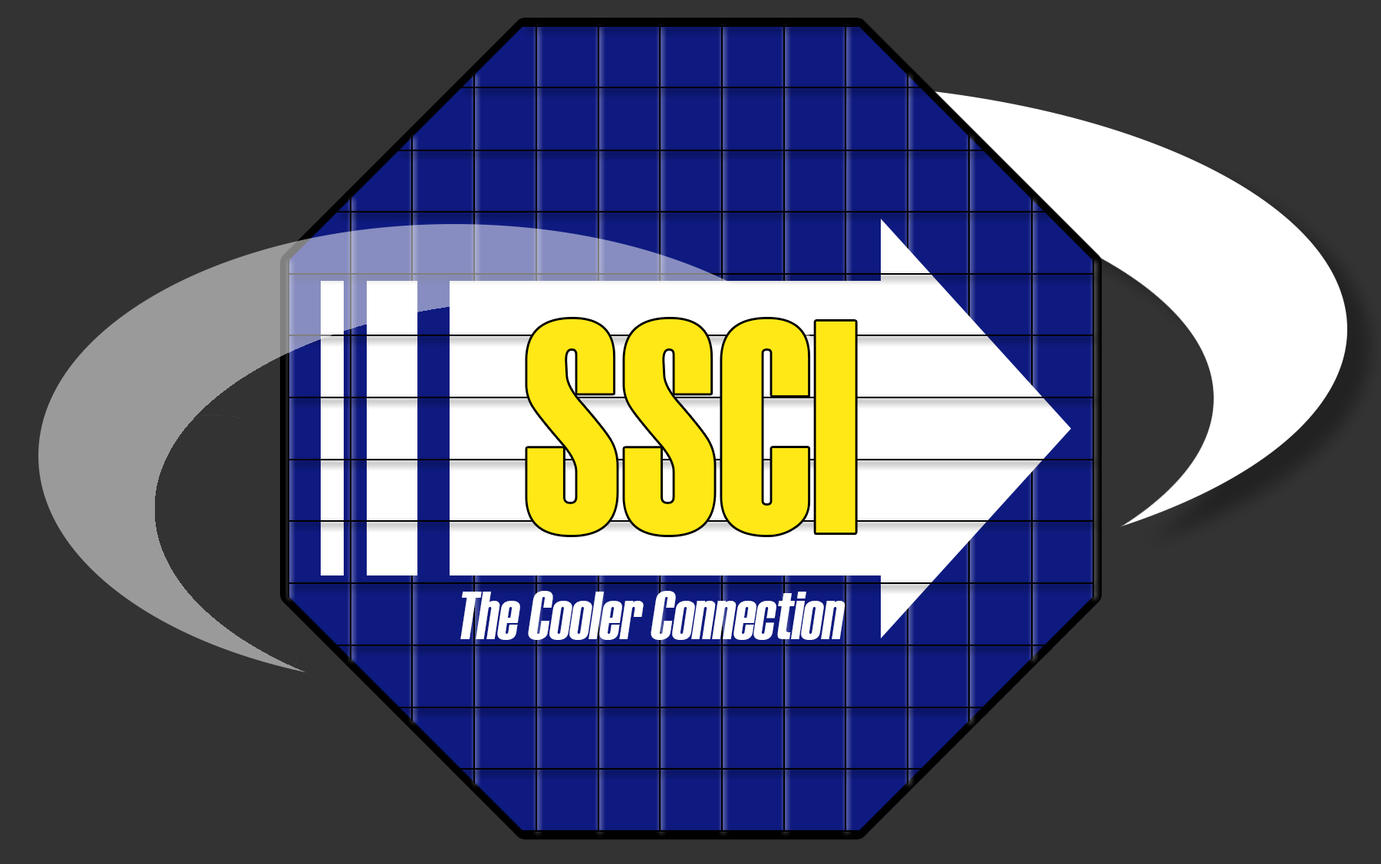
<style>
.page{position:relative;width:1381px;height:864px;background:#333333}
.page>*{position:absolute;margin:0}
.t1{font:301.1px "Haettenschweiler";color:#ffe816;scale:0.84 1}
.t2{font:67.1px "Haettenschweiler";color:#ffffff;font-style:italic;scale:0.86 1}
</style>
<div class="page">
<p class="t1" style="left:527px;top:319px;width:328px;height:216px">SSCI</p>
<p class="t2" style="left:460px;top:591px;width:385px;height:49px">The Cooler Connection</p>
</div>
